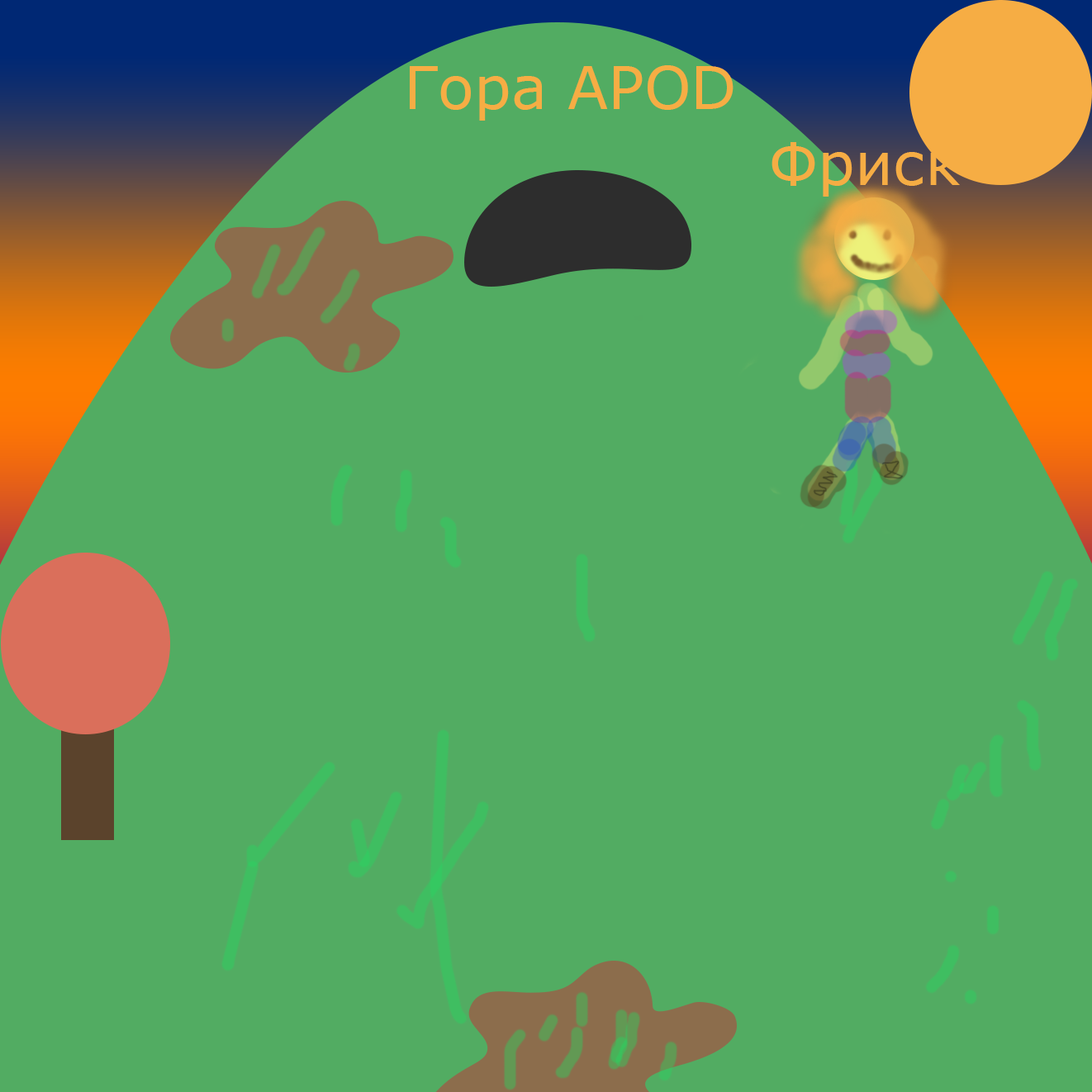
<style>
.page{position:relative;width:1092px;height:1092px;background:#52ac62}
.page>*{position:absolute;margin:0}
.t1{font:59.5px "Verdana";color:#f6ad44}
</style>
<div class="page">
<p class="t1" style="left:410px;top:65px;width:323px;height:56px">Гора APOD</p>
<p class="t1" style="left:771px;top:142px;width:189px;height:55px">Фриск</p>
</div>
